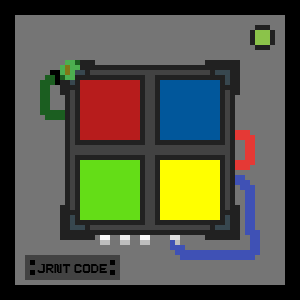
<style>
.page{position:relative;width:300px;height:300px;background:#757575}
.page>*{position:absolute;margin:0}
.t1{font:18px "Pixeboy";color:#000000}
</style>
<div class="page">
<p class="t1" style="left:37px;top:264px;width:70px;height:9px">jrnt code</p>
</div>
